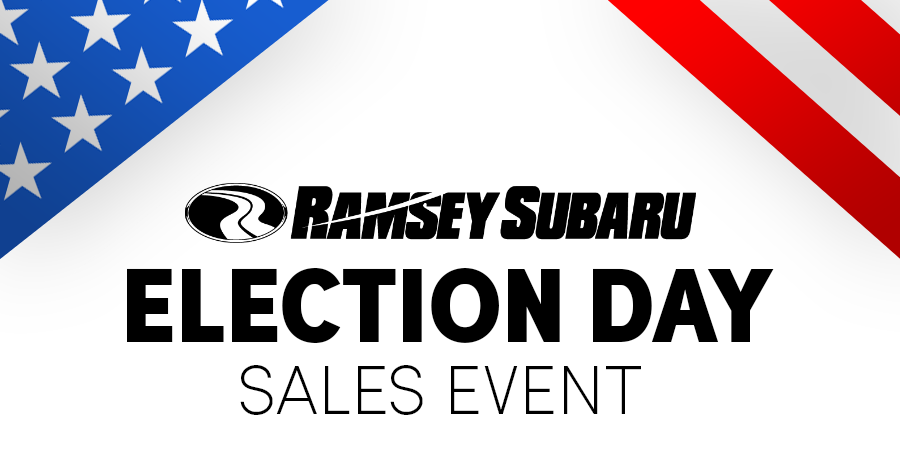
<style>
.page{position:relative;width:900px;height:469px;background:#ffffff}
.page>*{position:absolute;margin:0}
.t1{font:105.7px "SofiaProBlackCondensed";letter-spacing:-0.01em;color:#000000;scale:1.04 1}
.t2{font:69.7px "SofiaProExtraLight";letter-spacing:-0.01em;color:#000000}
</style>
<div class="page">
<p class="t1" style="left:127px;top:267px;width:647px;height:76px">ELECTION DAY</p>
<p class="t2" style="left:240px;top:365px;width:401px;height:50px">SALES EVENT</p>
</div>
